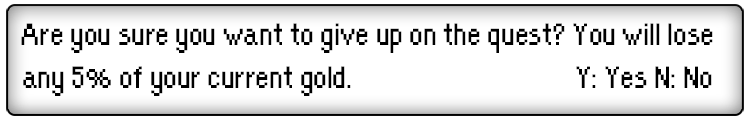
<style>
.page{position:relative;width:750px;height:120px;background:#ffffff}
.page>*{position:absolute;margin:0}
.t1{font:36px "OrangeKid-Regular";color:#000000}
</style>
<div class="page">
<p class="t1" style="left:21px;top:23px;width:692px;height:73px;text-align:center">Are you sure you want to give up on the quest? You will lose<br>any 5% of your current gold.         Y: Yes N: No</p>
</div>
